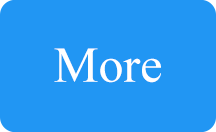
<style>
.page{position:relative;width:216px;height:132px;background:#2196f3}
.page>*{position:absolute;margin:0}
.t1{font:50px "TimesNewRomanPSMT";color:#ffffff}
</style>
<div class="page">
<p class="t1" style="left:54px;top:48px;width:107px;height:35px">More</p>
</div>
